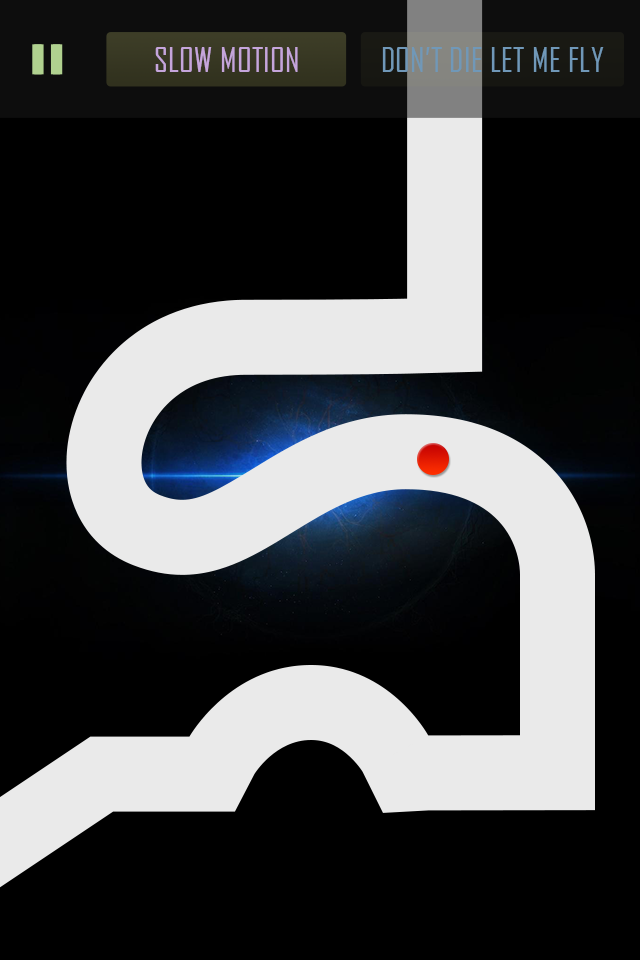
<style>
.page{position:relative;width:640px;height:960px;background:#000000}
.page>*{position:absolute;margin:0}
.t1{font:33px "AgencyFB-Reg";letter-spacing:0.01em;color:#c5a5db}
.t2{font:33px "AgencyFB-Reg";letter-spacing:0.01em;color:#7098b8}
</style>
<div class="page">
<p class="t1" style="left:155px;top:47px;width:143px;height:25px">SLOW MOTION</p>
<p class="t2" style="left:382px;top:47px;width:222px;height:25px">DON’T DIE LET ME FLY</p>
</div>
